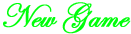
<style>
.page{position:relative;width:131px;height:34px;background:#ffffff}
.page>*{position:absolute;margin:0}
.t1{font:33.3px "EdwardianScriptITC";color:#00ff0b;font-weight:bold}
</style>
<div class="page">
<p class="t1" style="left:3px;top:2px;width:128px;height:32px">New Game</p>
</div>
